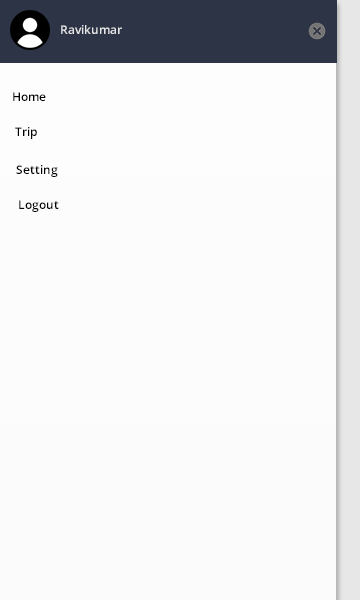
<style>
.page{position:relative;width:360px;height:600px;background:#fcfcfc}
.page>*{position:absolute;margin:0}
.t1{font:12px "OpenSans-Semibold";color:#e7e7e7}
.t2{font:12px "OpenSans-Semibold";color:#000000}
</style>
<div class="page">
<p class="t1" style="left:61px;top:25px;width:61px;height:9px">Ravikumar</p>
<p class="t2" style="left:13px;top:92px;width:33px;height:9px">Home</p>
<p class="t2" style="left:15px;top:127px;width:22px;height:12px">Trip</p>
<p class="t2" style="left:16px;top:165px;width:42px;height:12px">Setting</p>
<p class="t2" style="left:19px;top:200px;width:40px;height:12px">Logout</p>
</div>
